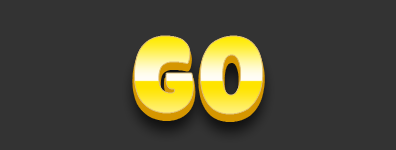
<style>
.page{position:relative;width:396px;height:150px;background:#333333}
.page>*{position:absolute;margin:0}
.t1{font:107.9px "iCielPony";letter-spacing:0.05em;scale:0.87 1}
</style>
<div class="page">
<p class="t1" style="left:134px;top:36px;width:129px;height:78px">GO</p>
</div>
